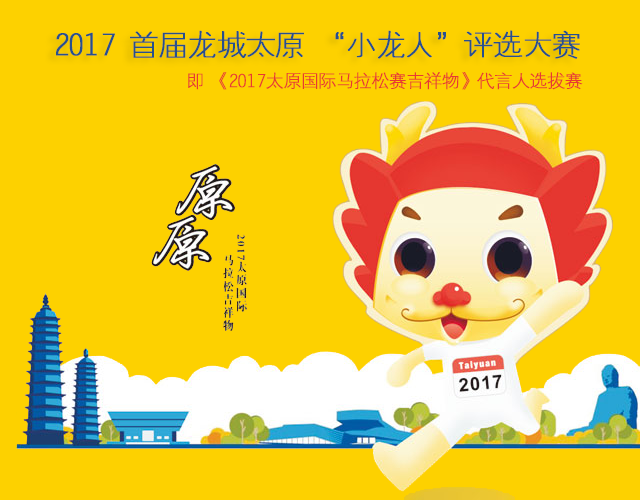
<style>
.page{position:relative;width:640px;height:500px;background:#fdd100}
.page>*{position:absolute;margin:0}
.t1{font:30px "FZYXJW--GB1-0";letter-spacing:-0.05em;color:#27508e;font-weight:bold}
.t2{font:18px "FZXDXJW--GB1-0";letter-spacing:-0.05em;color:#e83a31;font-weight:bold}
</style>
<div class="page">
<p class="t1" style="left:56px;top:30px;width:524px;height:29px">2017 首届龙城太原 “小龙人”评选大赛</p>
<p class="t2" style="left:188px;top:72px;width:395px;height:18px">即 《2017太原国际马拉松赛吉祥物》代言人选拔赛</p>
</div>
